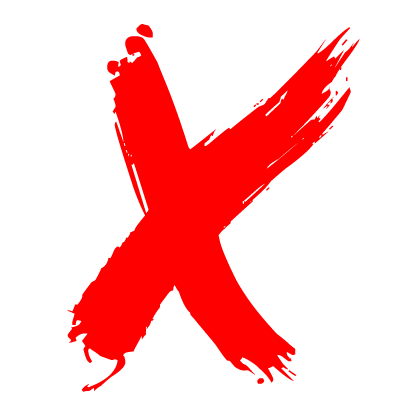
<style>
.page{position:relative;width:400px;height:400px;background:#ffffff}
.page>*{position:absolute;margin:0}
.t1{font:416.7px "LeviBrush";color:#ff0000}
</style>
<div class="page">
<p class="t1" style="left:67px;top:24px;width:293px;height:368px">X</p>
</div>
